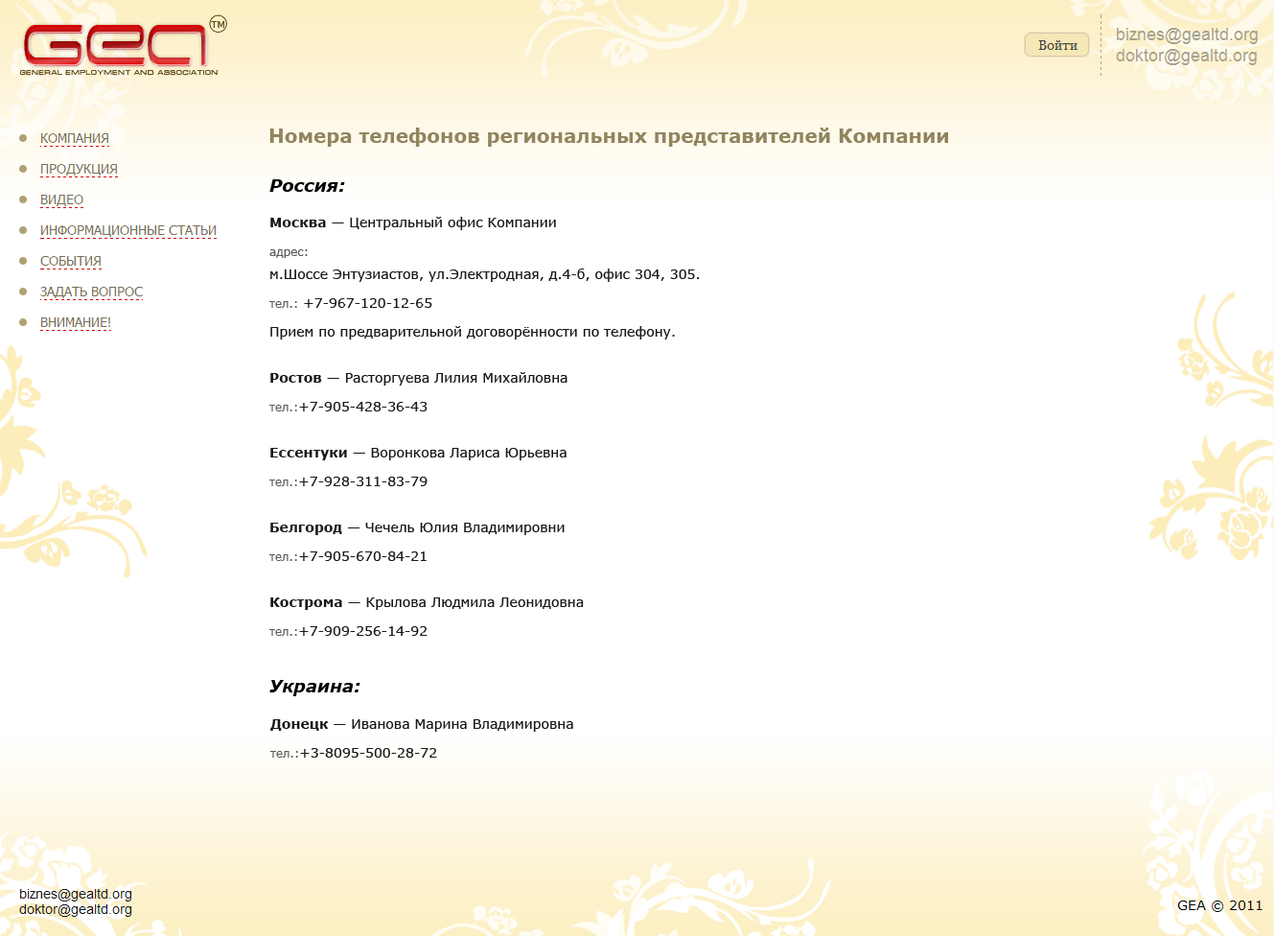
<style>
.page{position:relative;width:1274px;height:936px;background:#ffffff}
.page>*{position:absolute;margin:0}
.t1{font:19.2px "Verdana-Bold";color:#90845d}
.t2{font:17.3px "Verdana-BoldItalic";color:#000000}
.t3{font:13.4px/23px "Verdana";color:#191919}
.t4{font:13.4px/23px "Verdana-Bold";color:#191919}
.t5{font:11.5px/28.8px "Verdana";color:#5b5b5b}
.t6{font:11.5px/23px "Verdana";color:#5b5b5b}
.t7{font:13.4px/28.8px "Verdana";color:#191919}
</style>
<div class="page">
<p class="t1" style="left:269px;top:128px;width:679px;height:19px">Номера телефонов региональных представителей Компании</p>
<p class="t2" style="left:269px;top:179px;width:76px;height:13px">Россия:</p>
<p class="t3" style="left:268px;top:217px;width:431px;height:419px"><span class="t4">Москва </span>— Центральный офис Компании<br><span class="t5">а</span><span class="t6">дрес:</span> <br>м.Шоссе Энтузиастов, ул.Электродная, д.4-б, офис 304, 305. <br><span class="t5">т</span><span class="t6">ел.:</span> +7-967-120-12-65 <span class="t7"><br>П</span>рием по предварительной договорённости по телефону.<br><br><span class="t4">Ростов </span>— Расторгуева Лилия Михайловна <br><span class="t5">т</span><span class="t6">ел.:</span>+7-905-428-36-43<br><br><span class="t4">Ессентуки </span>— Воронкова Лариса Юрьевна <br><span class="t5">т</span><span class="t6">ел.:</span>+7-928-311-83-79<br><br><span class="t4">Белгород </span>— Чечель Юлия Владимировни <br><span class="t5">т</span><span class="t6">ел.:</span>+7-905-670-84-21<br><br><span class="t4">Кострома </span>— Крылова Людмила Леонидовна <br><span class="t5">т</span><span class="t6">ел.:</span>+7-909-256-14-92</p>
<p class="t2" style="left:269px;top:680px;width:92px;height:16px">Украина:</p>
<p class="t3" style="left:269px;top:719px;width:304px;height:38px"><span class="t4">Донецк</span> — Иванова Марина Владимировна <br><span class="t5">т</span><span class="t6">ел.:</span>+3-8095-500-28-72</p>
</div>
